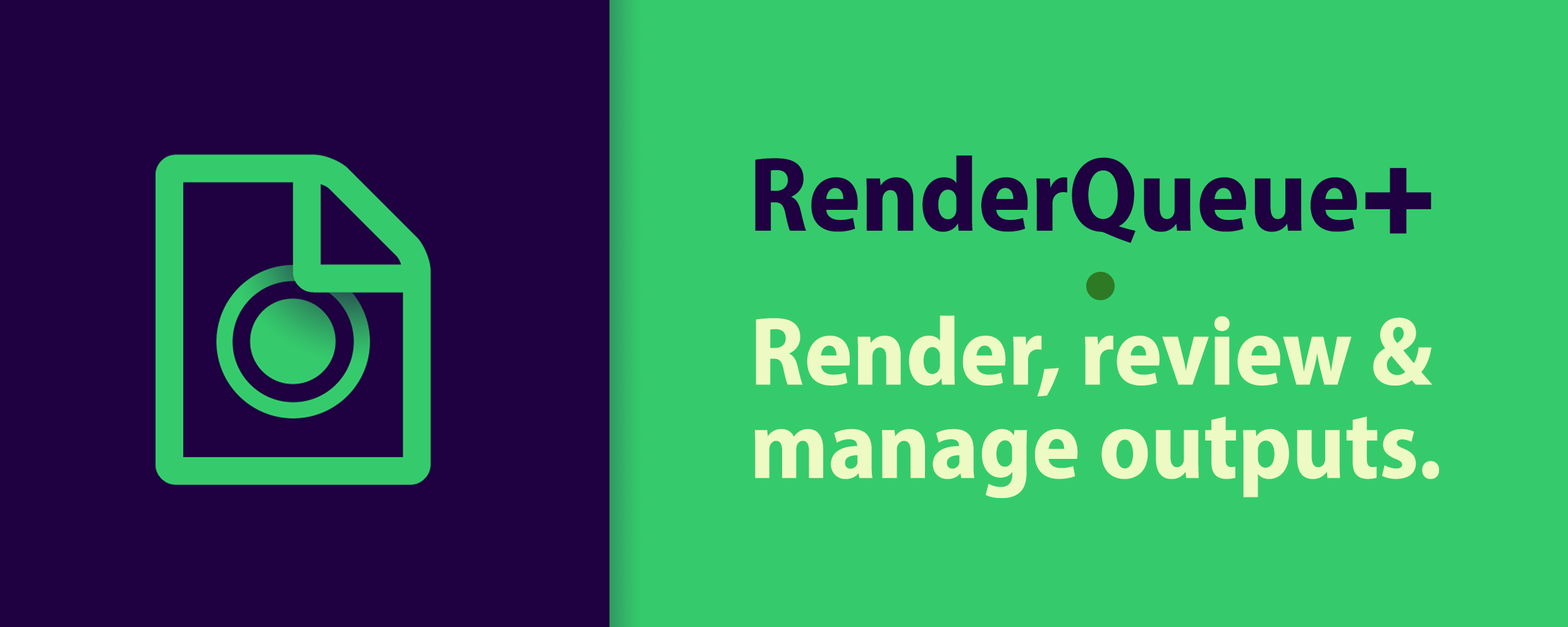
<style>
.page{position:relative;width:1568px;height:627px;background:#35cb6c}
.page>*{position:absolute;margin:0}
.t1{font:106.7px "MyriadConceptRoman-BoldSemiCondensed";color:#1f0040}
.t2{font:131px "Arial-BoldMT";color:#1f0040}
.t3{font:97.7px/93.4px "MyriadConceptRoman-BoldSemiCondensed";color:#eefac3}
</style>
<div class="page">
<p class="t1" style="left:755px;top:156px;width:676px;height:87px">RenderQueue<span class="t2">+</span></p>
<p class="t3" style="left:754px;top:315px;width:685px;height:183px">Render, review &amp;<br>manage outputs.</p>
</div>
